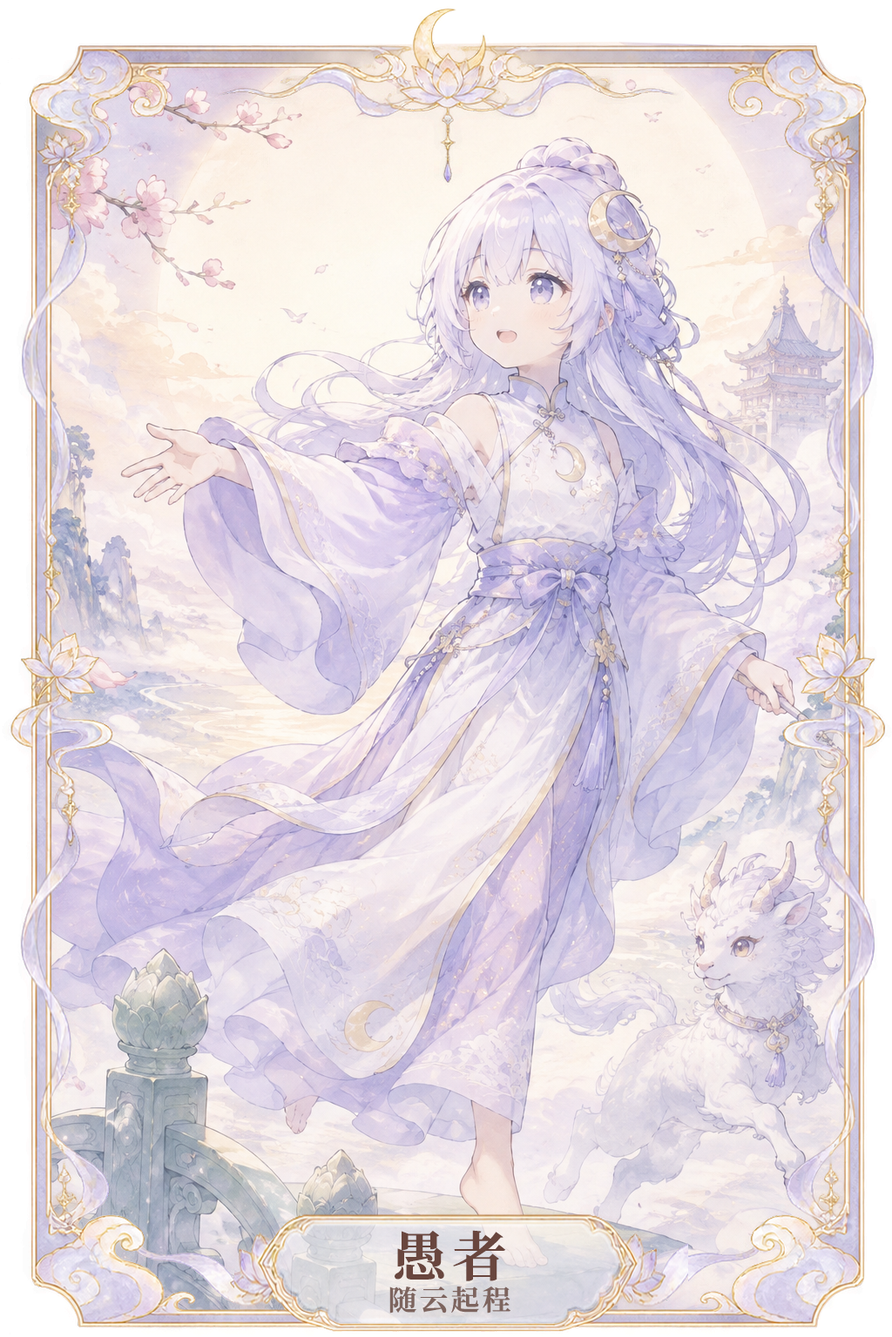
<style>
.page{position:relative;width:892px;height:1337px}
.page>*{position:absolute;margin:0}
.t1{font:27.9px/56.6px "SourceHanSerifCN-Bold";letter-spacing:0.1em;color:#7d645e}
.t2{font:53.6px/56.6px "SourceHanSerifCN-Bold";letter-spacing:0.1em;color:#69463e}
</style>
<div class="page">
<p class="t1" style="left:389px;top:1230px;width:121px;height:84px;text-align:center"><span class="t2">愚者<br></span>随云起程</p>
</div>
